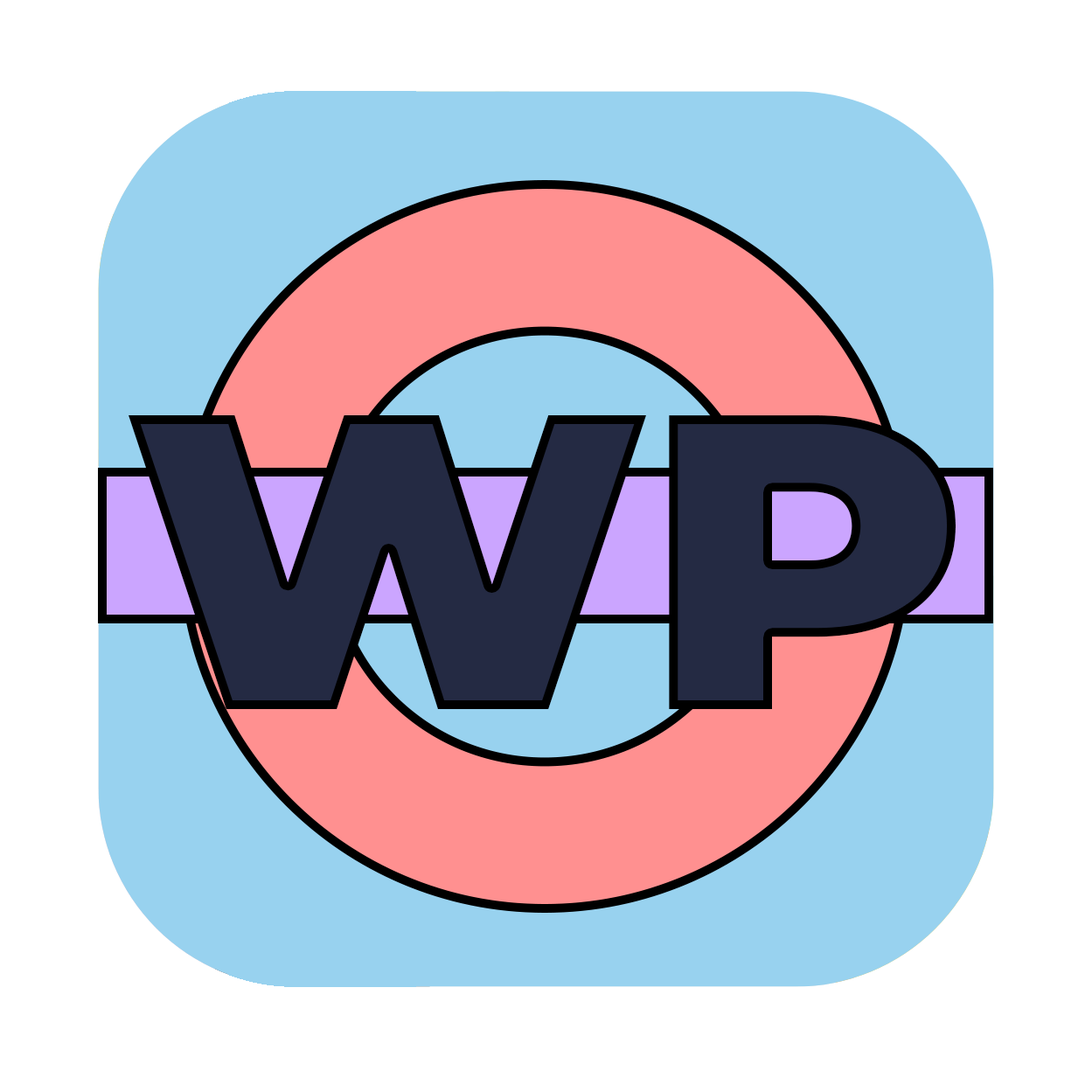
<style>
.page{position:relative;width:1092px;height:1092px;background:#ffffff}
.page>*{position:absolute;margin:0}
.t1{font:419.7px "Montserrat-Black";color:#242a43;font-variant:small-caps;scale:1.04 1}
</style>
<div class="page">
<p class="t1" style="left:129px;top:415px;width:827px;height:294px">WP</p>
</div>
